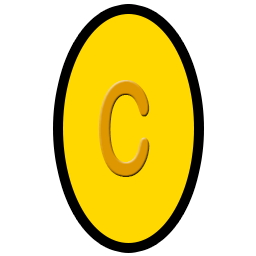
<style>
.page{position:relative;width:256px;height:256px;background:#ffffff}
.page>*{position:absolute;margin:0}
.t1{font:130.9px "ArialRoundedMTBold";color:#de9700;text-transform:uppercase;scale:0.6 1}
</style>
<div class="page">
<p class="t1" style="left:98px;top:80px;width:52px;height:97px">C</p>
</div>
